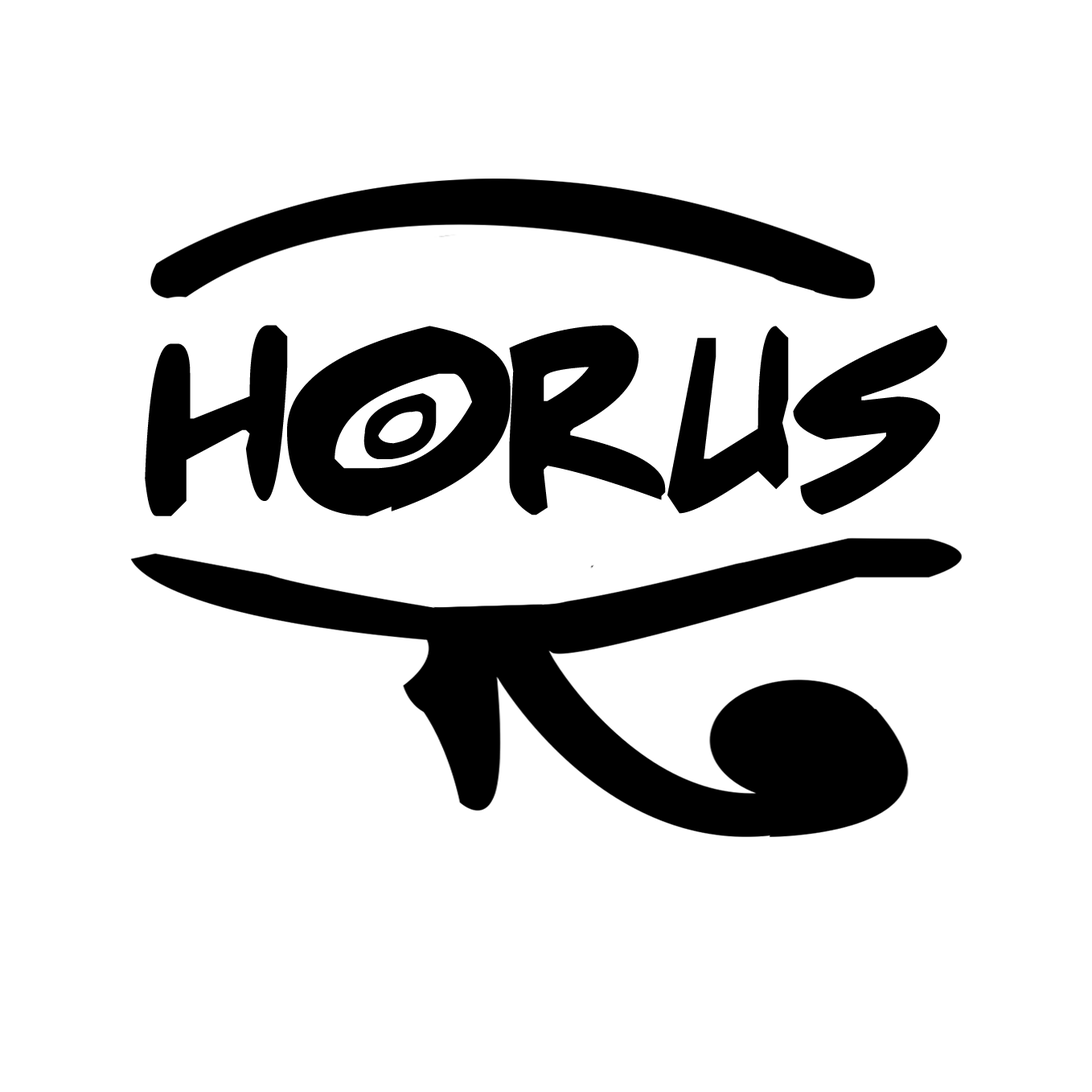
<style>
.page{position:relative;width:1092px;height:1092px;background:#ffffff}
.page>*{position:absolute;margin:0}
.t1{font:241.2px "AdamWarrenpro-Bold";color:#000000}
.t2{font:94px "AdamWarrenpro-Bold";color:#000000}
</style>
<div class="page">
<p class="t1" style="left:145px;top:325px;width:802px;height:191px">HORUS</p>
<p class="t2" style="left:363px;top:393px;width:74px;height:66px">o</p>
</div>
